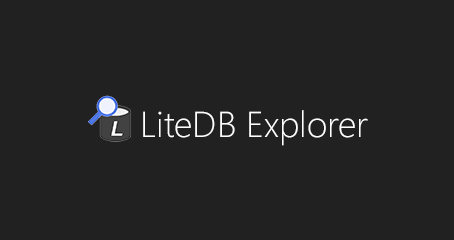
<style>
.page{position:relative;width:454px;height:240px;background:#212121}
.page>*{position:absolute;margin:0}
.t1{font:36px "SegoeUI-Light";color:#ffffff}
</style>
<div class="page">
<p class="t1" style="left:143px;top:110px;width:225px;height:36px">LiteDB Explorer</p>
</div>
